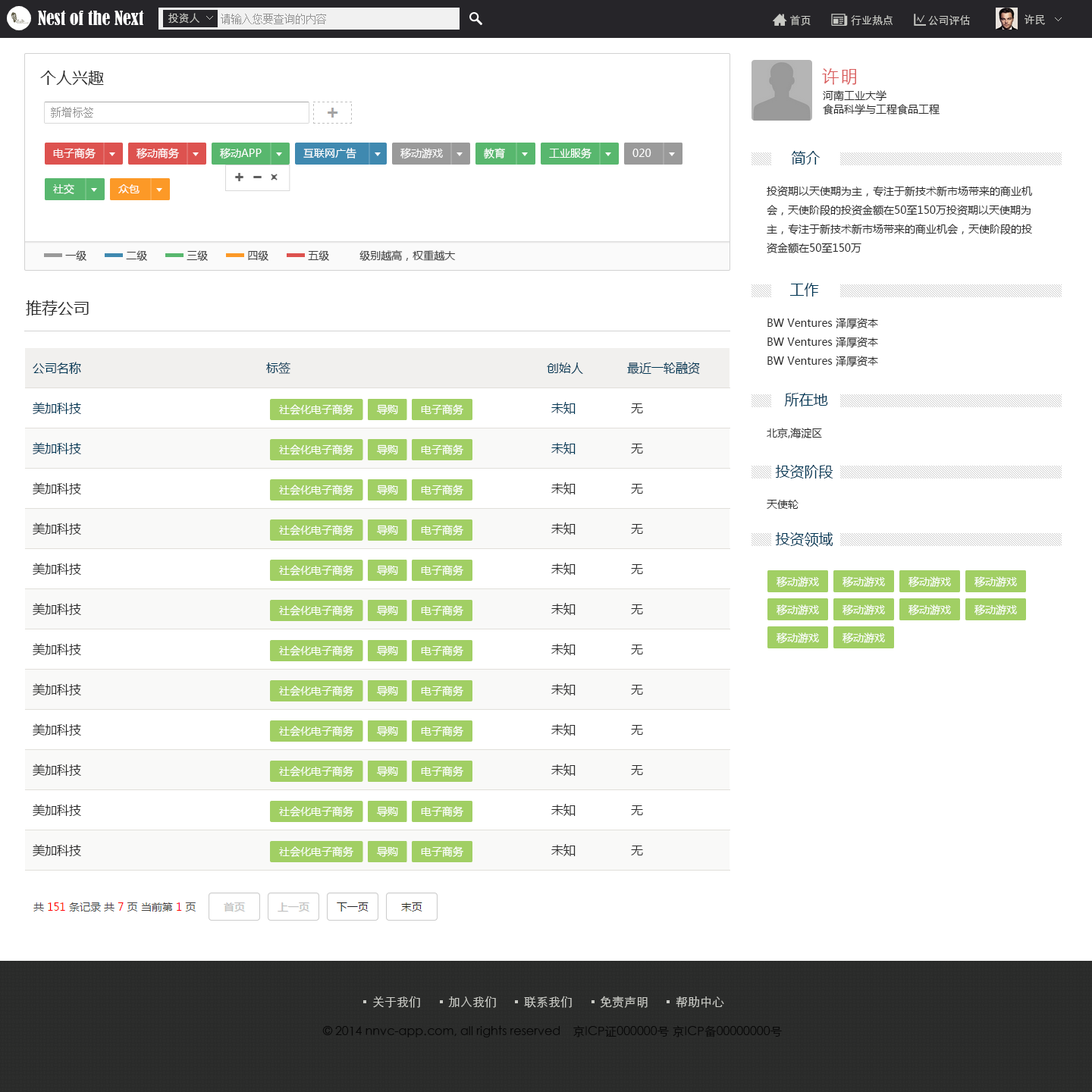
<style>
.page{position:relative;width:1092px;height:1092px;background:#ffffff}
.page>*{position:absolute;margin:0}
.t1{font:18.2px "BernardMT-Condensed";color:#ffffff}
.t2{font:10.6px "STXihei";color:#c9cac5}
.t3{font:10.6px "MyriadPro-Regular";color:#c9cac5}
.t4{font:10.6px "SimSun";color:#949494}
.t5{font:15.9px "MicrosoftYaHei";color:#2b2b2b}
.t6{font:18.2px "STXihei";letter-spacing:0.025em;color:#d95c5c}
.t7{font:10.6px/13.6px "MicrosoftYaHei";color:#2b2b2b}
.t8{font:10.6px "SimSun";letter-spacing:0.025em;color:#949494}
.t9{font:10.6px "MicrosoftYaHei";color:#ffffff}
.t10{font:14.4px "MicrosoftYaHei";color:#003856}
.t11{font:10.6px/19px "MicrosoftYaHei";color:#2b2b2b}
.t12{font:10.6px "MicrosoftYaHei";color:#3d3d3d}
.t13{font:12.1px "MicrosoftYaHei";color:#003856}
.t14{font:12.1px "MicrosoftYaHei";color:#2b2b2b}
.t15{font:10.6px "MicrosoftYaHei";color:#2b2b2b}
.t16{font:12.1px "STXihei";color:#c9cac5}
.t17{font:12.1px "STXihei";color:#080808}
</style>
<div class="page">
<p class="t1" style="left:38px;top:11px;width:106px;height:14px">Nest of the Next</p>
<p class="t2" style="left:168px;top:13px;width:31px;height:11px">投资人</p>
<p class="t3" style="left:206px;top:16px;width:7px;height:4px;rotate:-90deg">&lt;</p>
<p class="t4" style="left:221px;top:14px;width:105px;height:10px">请输入您要查询的内容</p>
<p class="t2" style="left:790px;top:15px;width:180px;height:11px">首页               行业热点             公司评估</p>
<p class="t2" style="left:1024px;top:14px;width:21px;height:11px">许民</p>
<p class="t3" style="left:1055px;top:17px;width:7px;height:4px;rotate:-90deg">&lt;</p>
<p class="t5" style="left:40px;top:71px;width:64px;height:15px">个人兴趣</p>
<p class="t6" style="left:822px;top:68px;width:34px;height:17px">许明</p>
<p class="t7" style="left:823px;top:90px;width:117px;height:25px">河南工业大学<br>食品科学与工程食品工程</p>
<p class="t8" style="left:51px;top:107px;width:42px;height:11px">新增标签</p>
<p class="t9" style="left:53px;top:148px;width:43px;height:10px">电子商务</p>
<p class="t9" style="left:136px;top:148px;width:43px;height:11px">移动商务</p>
<p class="t9" style="left:220px;top:148px;width:42px;height:11px">移动APP</p>
<p class="t9" style="left:303px;top:148px;width:53px;height:10px">互联网广告</p>
<p class="t9" style="left:400px;top:148px;width:43px;height:11px">移动游戏</p>
<p class="t9" style="left:484px;top:148px;width:21px;height:10px">教育</p>
<p class="t9" style="left:549px;top:148px;width:42px;height:10px">工业服务</p>
<p class="t9" style="left:632px;top:149px;width:19px;height:8px">020</p>
<p class="t10" style="left:791px;top:151px;width:30px;height:14px">简介</p>
<p class="t9" style="left:53px;top:184px;width:21px;height:10px">社交</p>
<p class="t9" style="left:118px;top:184px;width:22px;height:9px">众包</p>
<p class="t11" style="left:767px;top:186px;width:265px;height:67px">投资期以天使期为主，专注于新技术新市场带来的商业机会，天使阶段的投资金额在50至150万投资期以天使期为主，专注于新技术新市场带来的商业机会，天使阶段的投资金额在50至150万</p>
<p class="t12" style="left:65px;top:250px;width:21px;height:11px">一级</p>
<p class="t12" style="left:126px;top:250px;width:21px;height:11px">二级</p>
<p class="t12" style="left:187px;top:250px;width:21px;height:11px">三级</p>
<p class="t12" style="left:248px;top:250px;width:20px;height:11px">四级</p>
<p class="t12" style="left:308px;top:250px;width:21px;height:11px">五级</p>
<p class="t12" style="left:359px;top:250px;width:97px;height:11px">级别越高，权重越大</p>
<p class="t10" style="left:789px;top:283px;width:30px;height:14px">工作</p>
<p class="t5" style="left:26px;top:300px;width:63px;height:15px">推荐公司</p>
<p class="t11" style="left:767px;top:318px;width:111px;height:49px">BW Ventures 泽厚资本<br>BW Ventures 泽厚资本<br>BW Ventures 泽厚资本</p>
<p class="t13" style="left:33px;top:362px;width:48px;height:12px">公司名称</p>
<p class="t13" style="left:266px;top:362px;width:24px;height:12px">标签</p>
<p class="t13" style="left:547px;top:362px;width:36px;height:12px">创始人</p>
<p class="t13" style="left:627px;top:362px;width:73px;height:13px">最近一轮融资</p>
<p class="t13" style="left:33px;top:402px;width:48px;height:12px">美加科技</p>
<p class="t13" style="left:551px;top:402px;width:25px;height:12px">未知</p>
<p class="t10" style="left:784px;top:393px;width:44px;height:13px">所在地</p>
<p class="t9" style="left:279px;top:404px;width:74px;height:11px">社会化电子商务</p>
<p class="t9" style="left:377px;top:404px;width:21px;height:11px">导购</p>
<p class="t9" style="left:421px;top:404px;width:42px;height:11px">电子商务</p>
<p class="t14" style="left:631px;top:403px;width:12px;height:10px">无</p>
<p class="t15" style="left:767px;top:428px;width:55px;height:10px">北京,海淀区</p>
<p class="t13" style="left:33px;top:442px;width:48px;height:12px">美加科技</p>
<p class="t9" style="left:279px;top:444px;width:74px;height:11px">社会化电子商务</p>
<p class="t9" style="left:377px;top:444px;width:21px;height:11px">导购</p>
<p class="t9" style="left:421px;top:444px;width:42px;height:11px">电子商务</p>
<p class="t13" style="left:551px;top:442px;width:25px;height:12px">未知</p>
<p class="t14" style="left:631px;top:444px;width:12px;height:9px">无</p>
<p class="t10" style="left:775px;top:465px;width:58px;height:14px">投资阶段</p>
<p class="t14" style="left:33px;top:482px;width:48px;height:12px">美加科技</p>
<p class="t9" style="left:279px;top:485px;width:74px;height:10px">社会化电子商务</p>
<p class="t9" style="left:377px;top:485px;width:21px;height:10px">导购</p>
<p class="t9" style="left:421px;top:485px;width:42px;height:10px">电子商务</p>
<p class="t14" style="left:551px;top:482px;width:25px;height:12px">未知</p>
<p class="t14" style="left:631px;top:484px;width:12px;height:10px">无</p>
<p class="t15" style="left:767px;top:500px;width:32px;height:9px">天使轮</p>
<p class="t14" style="left:33px;top:522px;width:48px;height:13px">美加科技</p>
<p class="t9" style="left:279px;top:525px;width:74px;height:10px">社会化电子商务</p>
<p class="t9" style="left:377px;top:525px;width:21px;height:10px">导购</p>
<p class="t9" style="left:421px;top:525px;width:42px;height:10px">电子商务</p>
<p class="t14" style="left:551px;top:522px;width:25px;height:13px">未知</p>
<p class="t14" style="left:631px;top:524px;width:12px;height:10px">无</p>
<p class="t10" style="left:775px;top:532px;width:58px;height:15px">投资领域</p>
<p class="t14" style="left:33px;top:563px;width:48px;height:12px">美加科技</p>
<p class="t9" style="left:279px;top:565px;width:74px;height:11px">社会化电子商务</p>
<p class="t9" style="left:377px;top:565px;width:21px;height:11px">导购</p>
<p class="t9" style="left:421px;top:565px;width:42px;height:11px">电子商务</p>
<p class="t14" style="left:551px;top:563px;width:25px;height:12px">未知</p>
<p class="t14" style="left:631px;top:564px;width:12px;height:10px">无</p>
<p class="t9" style="left:777px;top:576px;width:42px;height:12px">移动游戏</p>
<p class="t9" style="left:842px;top:576px;width:43px;height:12px">移动游戏</p>
<p class="t9" style="left:908px;top:576px;width:43px;height:12px">移动游戏</p>
<p class="t9" style="left:974px;top:576px;width:43px;height:12px">移动游戏</p>
<p class="t14" style="left:33px;top:603px;width:48px;height:12px">美加科技</p>
<p class="t9" style="left:279px;top:605px;width:74px;height:11px">社会化电子商务</p>
<p class="t9" style="left:377px;top:605px;width:21px;height:11px">导购</p>
<p class="t9" style="left:421px;top:605px;width:42px;height:11px">电子商务</p>
<p class="t14" style="left:551px;top:603px;width:25px;height:12px">未知</p>
<p class="t14" style="left:631px;top:604px;width:12px;height:10px">无</p>
<p class="t9" style="left:777px;top:604px;width:42px;height:12px">移动游戏</p>
<p class="t9" style="left:842px;top:604px;width:43px;height:12px">移动游戏</p>
<p class="t9" style="left:908px;top:604px;width:43px;height:12px">移动游戏</p>
<p class="t9" style="left:974px;top:604px;width:43px;height:12px">移动游戏</p>
<p class="t9" style="left:777px;top:632px;width:42px;height:12px">移动游戏</p>
<p class="t9" style="left:842px;top:632px;width:43px;height:12px">移动游戏</p>
<p class="t14" style="left:33px;top:643px;width:48px;height:12px">美加科技</p>
<p class="t9" style="left:279px;top:645px;width:74px;height:11px">社会化电子商务</p>
<p class="t9" style="left:377px;top:645px;width:21px;height:11px">导购</p>
<p class="t9" style="left:421px;top:645px;width:42px;height:11px">电子商务</p>
<p class="t14" style="left:551px;top:643px;width:25px;height:12px">未知</p>
<p class="t14" style="left:631px;top:645px;width:12px;height:9px">无</p>
<p class="t14" style="left:33px;top:683px;width:48px;height:12px">美加科技</p>
<p class="t9" style="left:279px;top:686px;width:74px;height:10px">社会化电子商务</p>
<p class="t9" style="left:377px;top:686px;width:21px;height:10px">导购</p>
<p class="t9" style="left:421px;top:686px;width:42px;height:10px">电子商务</p>
<p class="t14" style="left:551px;top:683px;width:25px;height:12px">未知</p>
<p class="t14" style="left:631px;top:685px;width:12px;height:10px">无</p>
<p class="t14" style="left:33px;top:723px;width:48px;height:13px">美加科技</p>
<p class="t9" style="left:279px;top:726px;width:74px;height:10px">社会化电子商务</p>
<p class="t9" style="left:377px;top:726px;width:21px;height:10px">导购</p>
<p class="t9" style="left:421px;top:726px;width:42px;height:10px">电子商务</p>
<p class="t14" style="left:551px;top:723px;width:25px;height:13px">未知</p>
<p class="t14" style="left:631px;top:725px;width:12px;height:10px">无</p>
<p class="t14" style="left:33px;top:764px;width:48px;height:12px">美加科技</p>
<p class="t9" style="left:279px;top:766px;width:74px;height:11px">社会化电子商务</p>
<p class="t9" style="left:377px;top:766px;width:21px;height:11px">导购</p>
<p class="t9" style="left:421px;top:766px;width:42px;height:11px">电子商务</p>
<p class="t14" style="left:551px;top:764px;width:25px;height:12px">未知</p>
<p class="t14" style="left:631px;top:765px;width:12px;height:10px">无</p>
<p class="t14" style="left:33px;top:804px;width:48px;height:12px">美加科技</p>
<p class="t9" style="left:279px;top:806px;width:74px;height:11px">社会化电子商务</p>
<p class="t9" style="left:377px;top:806px;width:21px;height:11px">导购</p>
<p class="t9" style="left:421px;top:806px;width:42px;height:11px">电子商务</p>
<p class="t14" style="left:551px;top:804px;width:25px;height:12px">未知</p>
<p class="t14" style="left:631px;top:805px;width:12px;height:10px">无</p>
<p class="t14" style="left:33px;top:844px;width:48px;height:12px">美加科技</p>
<p class="t14" style="left:551px;top:844px;width:25px;height:12px">未知</p>
<p class="t14" style="left:631px;top:846px;width:12px;height:9px">无</p>
<p class="t9" style="left:279px;top:846px;width:74px;height:11px">社会化电子商务</p>
<p class="t9" style="left:377px;top:846px;width:21px;height:11px">导购</p>
<p class="t9" style="left:421px;top:846px;width:42px;height:11px">电子商务</p>
<p class="t16" style="left:373px;top:996px;width:351px;height:12px">关于我们         加入我们         联系我们         免责声明         帮助中心</p>
<p class="t17" style="left:322px;top:1025px;width:460px;height:12px">© 2014 nnvc-app.com, all rights reserved    京ICP证000000号 京ICP备00000000号</p>
</div>
